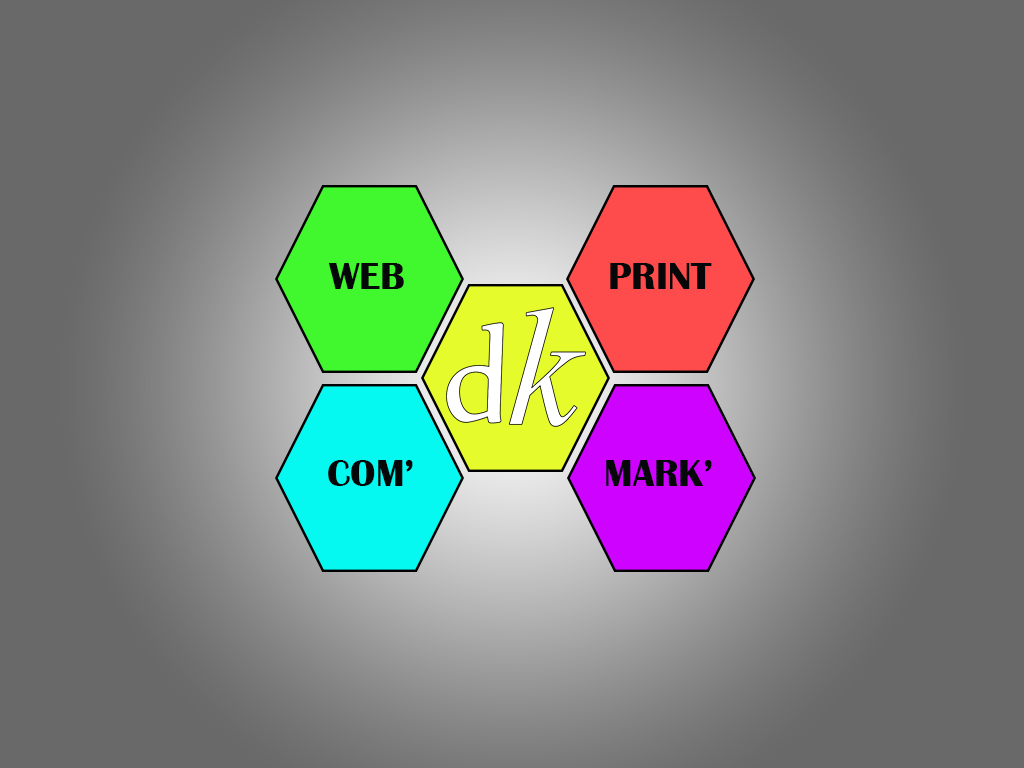
<style>
.page{position:relative;width:1024px;height:768px;background:#696969}
.page>*{position:absolute;margin:0}
.t1{font:38.9px "BritannicBold";color:#060709}
</style>
<div class="page">
<p class="t1" style="left:328px;top:263px;width:76px;height:26px">WEB</p>
<p class="t1" style="left:610px;top:263px;width:102px;height:26px">PRINT</p>
<p class="t1" style="left:328px;top:460px;width:85px;height:26px">COM’</p>
<p class="t1" style="left:606px;top:460px;width:106px;height:26px">MARK’</p>
</div>
